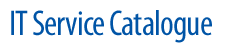
<style>
.page{position:relative;width:226px;height:51px;background:#ffffff}
.page>*{position:absolute;margin:0}
.t1{font:36px "MyriadPro-Cond";letter-spacing:-0.025em;color:#0054a6}
</style>
<div class="page">
<p class="t1" style="left:11px;top:10px;width:201px;height:33px">IT Service Catalogue</p>
</div>
